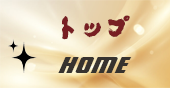
<style>
.page{position:relative;width:170px;height:88px}
.page>*{position:absolute;margin:0}
.t1{font:25.7px "Konshin";color:#781f23}
.t2{font:23.7px "241-CAI978";color:#37332f}
</style>
<div class="page">
<p class="t1" style="left:62px;top:15px;width:68px;height:25px">トップ</p>
<p class="t2" style="left:58px;top:57px;width:74px;height:16px">Home</p>
</div>
